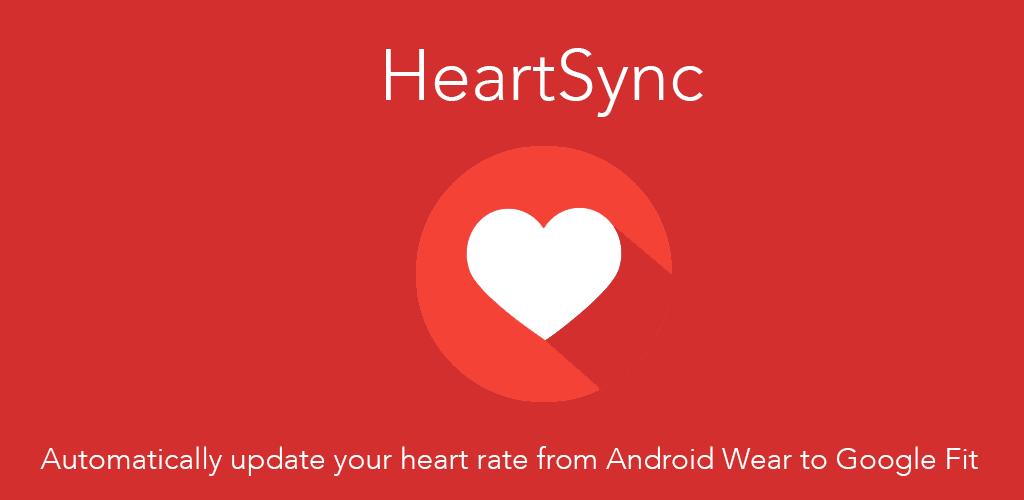
<style>
.page{position:relative;width:1024px;height:500px;background:#d32f2f}
.page>*{position:absolute;margin:0}
.t1{font:72px "Avenir-Light";color:#ffffff}
.t2{font:30px "Avenir-Light";color:#ffffff}
</style>
<div class="page">
<p class="t1" style="left:386px;top:48px;width:317px;height:69px">HeartSync</p>
<p class="t2" style="left:40px;top:446px;width:938px;height:30px">Automatically update your heart rate from Android Wear to Google Fit</p>
</div>
